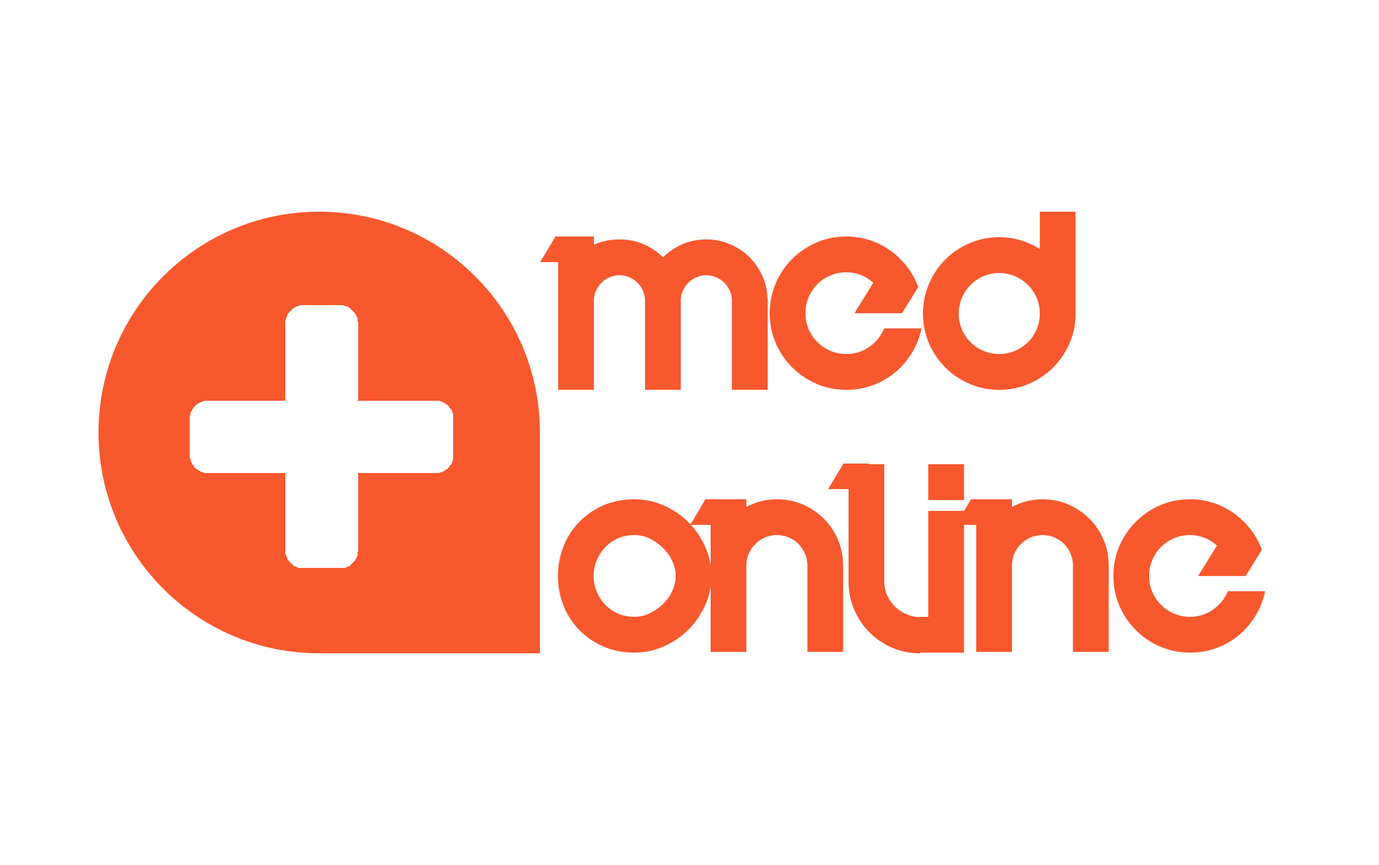
<style>
.page{position:relative;width:1379px;height:865px;background:#ffffff}
.page>*{position:absolute;margin:0}
.t1{font:218.9px "Velocity";color:#f7582d}
</style>
<div class="page">
<p class="t1" style="left:540px;top:212px;width:725px;height:441px">med<br>Online</p>
</div>
